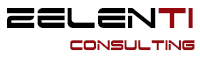
<style>
.page{position:relative;width:200px;height:61px;background:#ffffff}
.page>*{position:absolute;margin:0}
.t1{font:34.5px "Dodger";color:#000000;scale:0.83 1}
.t2{font:34.5px "Dodger";color:#96080f;scale:0.83 1}
.t3{font:16.6px "Dodger";color:#96080f;scale:0.78 1}
</style>
<div class="page">
<p class="t1" style="left:7px;top:8px;width:186px;height:20px">ZELEN<span class="t2">TI</span></p>
<p class="t3" style="left:70px;top:40px;width:125px;height:11px">CONSULTING</p>
</div>
